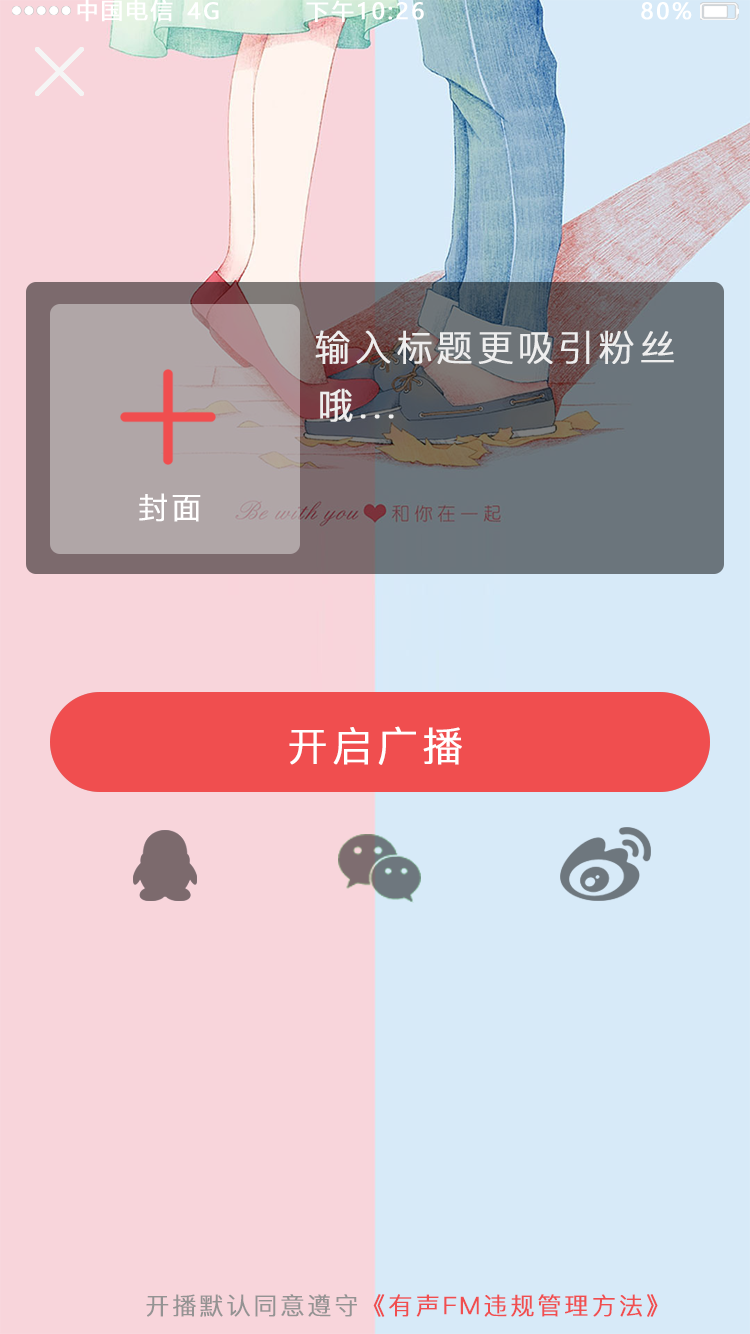
<style>
.page{position:relative;width:750px;height:1334px;background:#f8d5db}
.page>*{position:absolute;margin:0}
.t1{font:22px "MicrosoftYaHei";letter-spacing:0.1em;color:#ffffff;text-transform:uppercase;font-weight:bold}
.t2{font:36px "PingFang-SC-Regular";letter-spacing:0.1em;color:#eeeeee;text-transform:uppercase;font-weight:bold}
.t3{font:30px "PingFang-SC-Regular";letter-spacing:0.1em;color:#ffffff;text-transform:uppercase;font-weight:bold}
.t4{font:40px "PingFang-SC-Regular";letter-spacing:0.1em;color:#ffffff;text-transform:uppercase;font-weight:bold}
.t5{font:24px "PingFang-SC-Regular";letter-spacing:0.1em;color:#f04e4f;text-transform:uppercase;font-weight:bold}
.t6{font:24px "PingFang-SC-Regular";letter-spacing:0.1em;color:#949393;text-transform:uppercase;font-weight:bold}
</style>
<div class="page">
<p class="t1" style="left:77px;top:0px;width:96px;height:22px">中国电信</p>
<p class="t1" style="left:187px;top:2px;width:32px;height:18px">4G</p>
<p class="t1" style="left:306px;top:0px;width:118px;height:23px">下午10:26</p>
<p class="t1" style="left:641px;top:2px;width:51px;height:18px">80%</p>
<p class="t2" style="left:315px;top:330px;width:359px;height:34px">输入标题更吸引粉丝</p>
<p class="t2" style="left:320px;top:388px;width:74px;height:34px">哦...</p>
<p class="t3" style="left:139px;top:493px;width:62px;height:29px">封面</p>
<p class="t4" style="left:289px;top:726px;width:173px;height:39px">开启广播</p>
<p class="t5" style="left:146px;top:1294px;width:512px;height:23px"><span class="t6">开播默认同意遵守</span>《有声FM违规管理方法》</p>
</div>
